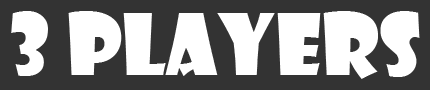
<style>
.page{position:relative;width:430px;height:90px;background:#333333}
.page>*{position:absolute;margin:0}
.t1{font:83.3px "ShowcardGothic-Reg";color:#ffffff}
</style>
<div class="page">
<p class="t1" style="left:11px;top:11px;width:409px;height:68px">3 players</p>
</div>
